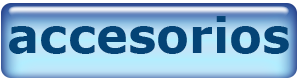
<style>
.page{position:relative;width:300px;height:80px}
.page>*{position:absolute;margin:0}
.t1{font:48px "Verdana-Bold";color:#044476}
</style>
<div class="page">
<p class="t1" style="left:9px;top:16px;width:280px;height:38px">accesorios</p>
</div>
